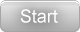
<style>
.page{position:relative;width:80px;height:32px}
.page>*{position:absolute;margin:0}
.t1{font:18px "ArialMT";color:#ffffff}
</style>
<div class="page">
<p class="t1" style="left:20px;top:7px;width:38px;height:21px">Start</p>
</div>
